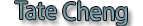
<style>
.page{position:relative;width:143px;height:26px;background:#ffffff}
.page>*{position:absolute;margin:0}
.t1{font:26.3px "MyriadPro-Regular";color:#779dab;scale:0.92 1}
</style>
<div class="page">
<p class="t1" style="left:15px;top:1px;width:112px;height:25px;rotate:1deg">Tate Cheng</p>
</div>
